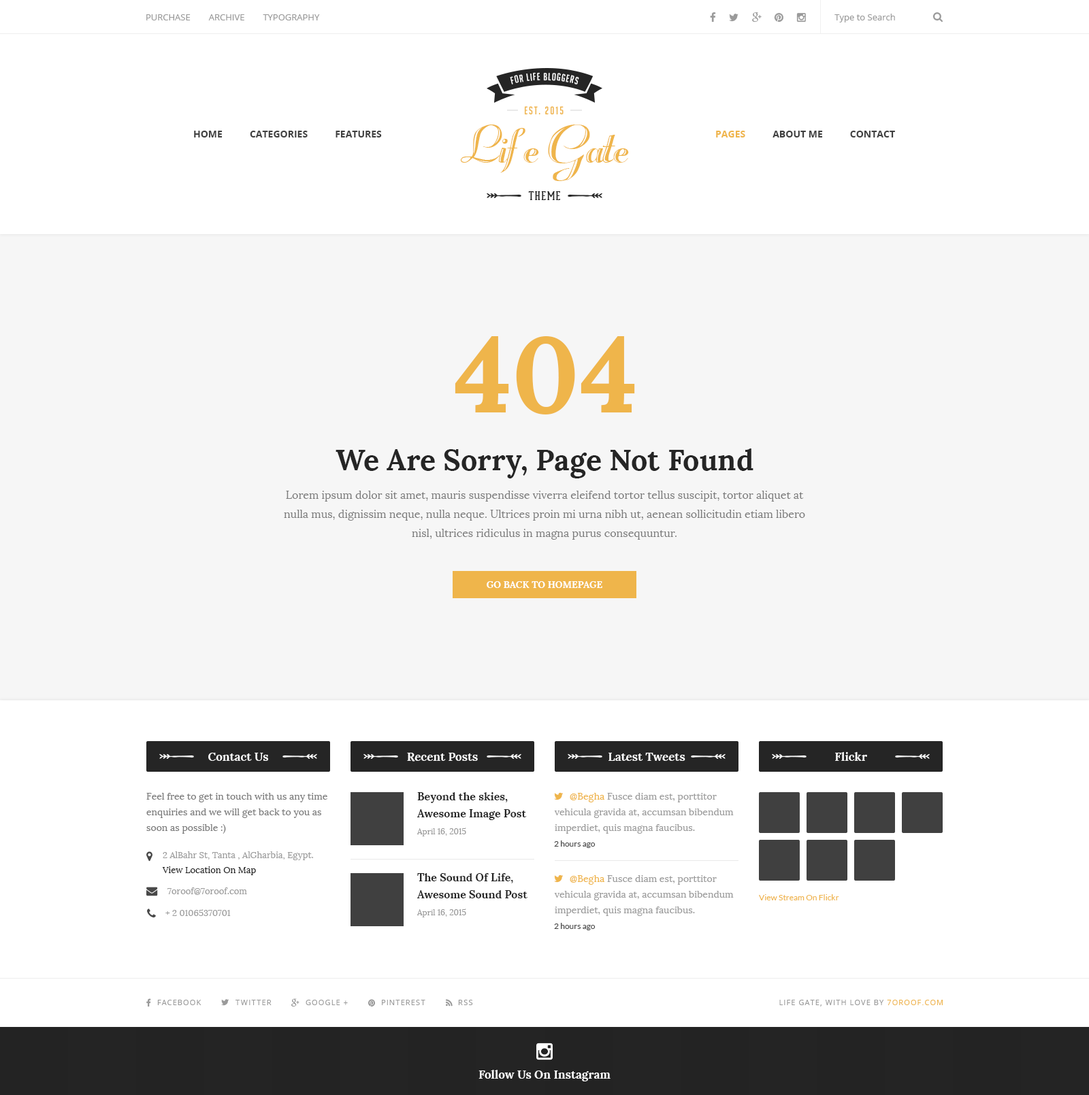
<style>
.page{position:relative;width:1089px;height:1095px;background:#ffffff}
.page>*{position:absolute;margin:0}
.t1{font:8.8px "OpenSans";color:#9a9a9a;text-transform:uppercase}
.t2{font:8.8px "OpenSans";color:#9a9a9a}
.t3{font:10.2px "BigNoodleTitling";letter-spacing:0.075em;color:#fafafa}
.t4{font:10.9px "BigNoodleTitling";letter-spacing:0.12em;color:#efb54b}
.t5{font:61.3px "Rechtman-Plain";color:#efb54b}
.t6{font:9.5px "OpenSans-Bold";color:#404040;text-transform:uppercase}
.t7{font:9.5px "OpenSans-Bold";color:#efb54b;text-transform:uppercase}
.t8{font:11.6px "GearedSlab-Regular";letter-spacing:0.1em;color:#252525;text-transform:uppercase}
.t9{font:106.2px "Lora-Bold";color:#efb54b;text-transform:uppercase}
.t10{font:29.3px "Lora-Bold";color:#252525}
.t11{font:10.9px/19.1px "Lora-Regular";color:#7c7c7c}
.t12{font:9.5px "Lora-Bold";color:#ffffff;text-transform:uppercase}
.t13{font:11.6px "Lora-Bold";color:#fefefe}
.t14{font:9.5px/15.7px "Lora-Regular";color:#7c7c7c}
.t15{font:10.9px/17px "Lora-Bold";color:#252525}
.t16{font:9.5px/15.7px "Lora-Regular";color:#9d9d9d}
.t17{font:9.5px/15.7px "Lora-Regular";color:#1b88e7}
.t18{font:9.5px/15.7px "Lora-Regular";color:#efb54b}
.t19{font:8.2px "Lora-Regular";color:#9a9a9a}
.t20{font:8.2px "Lato-Regular";color:#494949}
.t21{font:8.8px/15px "Lora-Regular";color:#9d9d9d}
.t22{font:8.8px/15px "Lora-Regular";color:#252525}
.t23{font:8.8px "Lora-Regular";color:#9d9d9d}
.t24{font:8.2px "Lato-Regular";color:#efb54b}
.t25{font:7.5px "OpenSans";letter-spacing:0.1em;color:#9a9a9a;text-transform:uppercase}
.t26{font:7.5px "OpenSans";letter-spacing:0.1em;color:#efb54b;text-transform:uppercase}
.t27{font:11.6px "Lora-Bold";color:#ffffff}
</style>
<div class="page">
<p class="t1" style="left:146px;top:14px;width:174px;height:6px">Purchase        Archive        Typography</p>
<p class="t2" style="left:834px;top:14px;width:61px;height:8px">Type to Search</p>
<p class="t3" style="left:510px;top:72px;width:69px;height:12px">For Life Bloggers</p>
<p class="t4" style="left:524px;top:106px;width:40px;height:9px">EST. 2015</p>
<p class="t5" style="left:460px;top:125px;width:169px;height:56px">Life Gate</p>
<p class="t6" style="left:194px;top:131px;width:188px;height:6px">Home           Categories           Features</p>
<p class="t6" style="left:716px;top:131px;width:179px;height:6px"><span class="t7">Pages</span>           ABOUT ME           Contact</p>
<p class="t8" style="left:528px;top:191px;width:32px;height:9px">Theme</p>
<p class="t9" style="left:455px;top:336px;width:180px;height:78px">404</p>
<p class="t10" style="left:336px;top:449px;width:417px;height:29px">We Are Sorry, Page Not Found</p>
<p class="t11" style="left:284px;top:491px;width:521px;height:49px;text-align:center">Lorem ipsum dolor sit amet, mauris suspendisse viverra eleifend tortor tellus suscipit, tortor aliquet at nulla mus, dignissim neque, nulla neque. Ultrices proin mi urna nibh ut, aenean sollicitudin etiam libero nisl, ultrices ridiculus in magna purus consequuntur.</p>
<p class="t12" style="left:487px;top:581px;width:115px;height:7px">Go Back To Homepage</p>
<p class="t13" style="left:208px;top:753px;width:60px;height:8px">Contact Us</p>
<p class="t13" style="left:407px;top:753px;width:71px;height:9px">Recent Posts</p>
<p class="t13" style="left:608px;top:753px;width:77px;height:8px">Latest Tweets</p>
<p class="t13" style="left:835px;top:752px;width:32px;height:9px">Flickr</p>
<p class="t14" style="left:146px;top:793px;width:181px;height:41px">Feel free to get in touch with us any time enquiries and we will get back to you as soon as possible :)</p>
<p class="t15" style="left:417px;top:792px;width:110px;height:28px">Beyond the skies, Awesome Image Post</p>
<p class="t16" style="left:554px;top:793px;width:180px;height:41px"><span class="t17">      </span><span class="t18">@Begha </span>Fusce diam est, porttitor vehicula gravida at, accumsan bibendum imperdiet, quis magna faucibus.</p>
<p class="t19" style="left:417px;top:828px;width:49px;height:8px">April 16, 2015</p>
<p class="t20" style="left:554px;top:841px;width:42px;height:7px">2 hours ago</p>
<p class="t21" style="left:162px;top:851px;width:151px;height:24px">2 AlBahr St, Tanta , AlGharbia, Egypt.<br><span class="t22">View Location On Map</span></p>
<p class="t15" style="left:417px;top:873px;width:110px;height:25px">The Sound Of Life, Awesome Sound Post</p>
<p class="t16" style="left:554px;top:875px;width:180px;height:41px"><span class="t17">      </span><span class="t18">@Begha </span>Fusce diam est, porttitor vehicula gravida at, accumsan bibendum imperdiet, quis magna faucibus.</p>
<p class="t23" style="left:167px;top:887px;width:80px;height:8px">7oroof@7oroof.com</p>
<p class="t24" style="left:759px;top:894px;width:80px;height:6px">View Stream On Flickr</p>
<p class="t23" style="left:165px;top:909px;width:66px;height:7px">+ 2 01065370701</p>
<p class="t19" style="left:417px;top:909px;width:49px;height:8px">April 16, 2015</p>
<p class="t20" style="left:554px;top:923px;width:42px;height:7px">2 hours ago</p>
<p class="t25" style="left:157px;top:1000px;width:44px;height:5px">Facebook</p>
<p class="t25" style="left:235px;top:1000px;width:37px;height:5px">Twitter</p>
<p class="t25" style="left:306px;top:1000px;width:42px;height:5px">Google +</p>
<p class="t25" style="left:382px;top:1000px;width:43px;height:5px">Pinterest</p>
<p class="t25" style="left:458px;top:1000px;width:15px;height:5px">RSS</p>
<p class="t25" style="left:779px;top:1000px;width:164px;height:7px">Life Gate, With Love By <span class="t26">7oroof.com</span></p>
<p class="t27" style="left:478px;top:1070px;width:132px;height:11px">Follow Us On Instagram</p>
</div>
